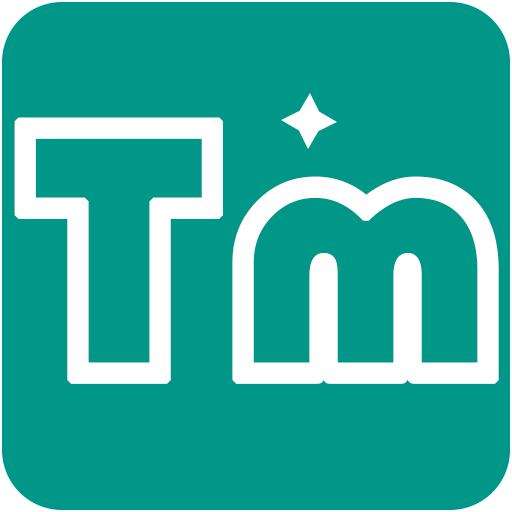
<style>
.page{position:relative;width:512px;height:512px;background:#009688}
.page>*{position:absolute;margin:0}
.t1{font:369px "STCaiyun";color:#ffffff;font-weight:bold}
</style>
<div class="page">
<p class="t1" style="left:14px;top:117px;width:485px;height:267px">Tm</p>
</div>
